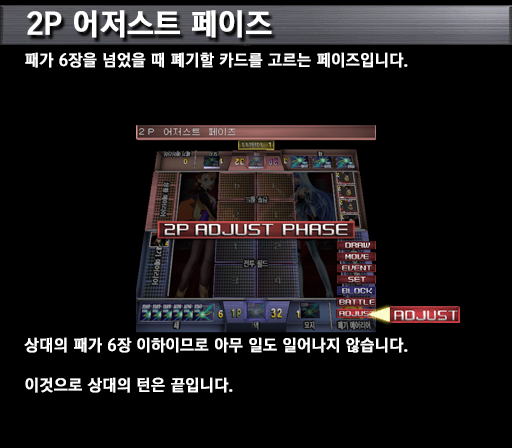
<style>
.page{position:relative;width:512px;height:448px;background:#000000}
.page>*{position:absolute;margin:0}
.t1{font:30px "KoreanGD15-R";color:#ffffff;font-weight:bold}
.t2{font:16px "KoreanGD15-R";color:#ffffff;font-weight:bold}
.t3{font:16px/20px "KoreanGD15-R";color:#ffffff;font-weight:bold}
</style>
<div class="page">
<p class="t1" style="left:27px;top:10px;width:245px;height:28px">2P 어저스트 페이즈</p>
<p class="t2" style="left:25px;top:52px;width:383px;height:16px">패가 6장을 넘었을 때 폐기할 카드를 고르는 페이즈입니다.</p>
<p class="t3" style="left:24px;top:337px;width:384px;height:56px">상대의 패가 6장 이하이므로 아무 일도 일어나지 않습니다.<br><br>이것으로 상대의 턴은 끝입니다.</p>
</div>
